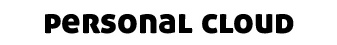
<style>
.page{position:relative;width:337px;height:45px;background:#ffffff}
.page>*{position:absolute;margin:0}
.t1{font:36px "AllerDisplay";color:#000000}
</style>
<div class="page">
<p class="t1" style="left:45px;top:14px;width:249px;height:20px">personal cloud</p>
</div>
